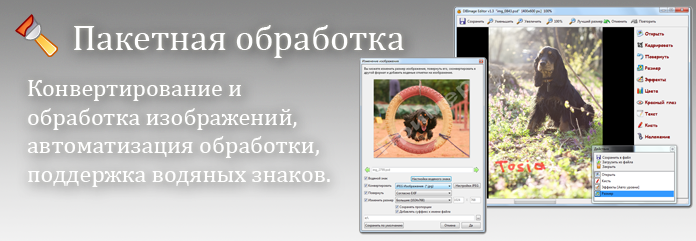
<style>
.page{position:relative;width:696px;height:241px}
.page>*{position:absolute;margin:0}
.t1{font:36px "CambriaMath";color:#ffffff}
.t2{font:24px "CambriaMath";color:#ffffff}
</style>
<div class="page">
<p class="t1" style="left:74px;top:25px;width:330px;height:33px">Пакетная обработка</p>
<p class="t2" style="left:27px;top:80px;width:303px;height:107px">Конвертирование и обработка изображений, автоматизация обработки, поддержка водяных знаков.</p>
</div>
